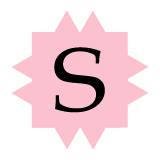
<style>
.page{position:relative;width:160px;height:160px;background:#ffffff}
.page>*{position:absolute;margin:0}
.t1{font:90.5px "BookAntiqua";color:#000000;scale:1.11 1}
</style>
<div class="page">
<p class="t1" style="left:54px;top:47px;width:51px;height:66px">S</p>
</div>
